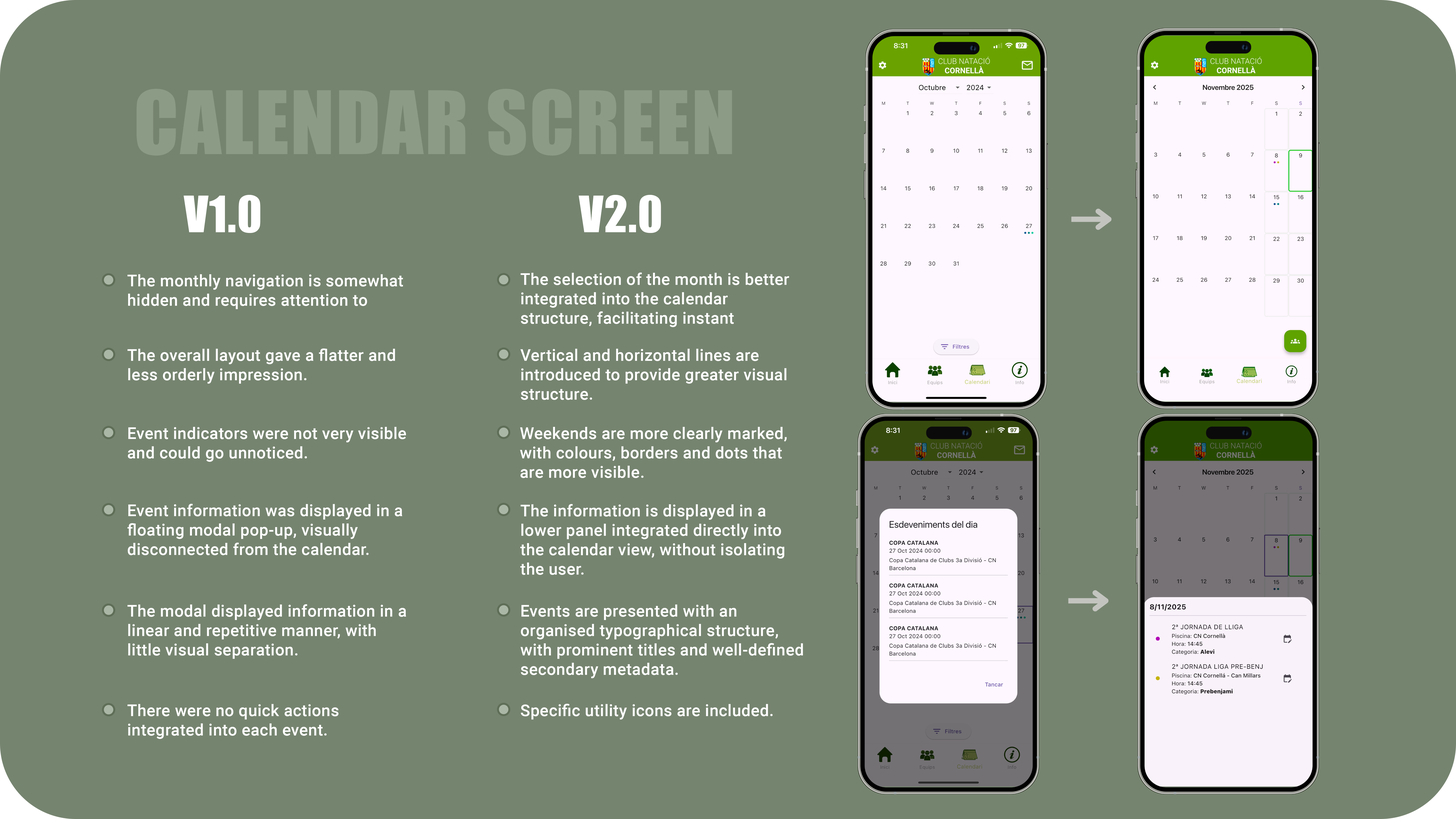
<style>
.page{position:relative;width:1456px;height:819px;background:#75846f}
.page>*{position:absolute;margin:0}
.t1{font:80.9px "Impact";letter-spacing:0.02em;color:#8c9b86}
.t2{font:46.2px "Impact";letter-spacing:0.02em;color:#ffffff}
.t3{font:16.2px "Roboto-Medium";letter-spacing:0.02em;color:#ffffff}
</style>
<div class="page">
<p class="t1" style="left:136px;top:89px;width:596px;height:67px">CALENDAR SCREEN</p>
<p class="t2" style="left:183px;top:195px;width:77px;height:38px">V1.0</p>
<p class="t2" style="left:579px;top:195px;width:82px;height:38px">V2.0</p>
<p class="t3" style="left:127px;top:274px;width:276px;height:35px">The monthly navigation is somewhat hidden and requires attention to locate.</p>
<p class="t3" style="left:521px;top:273px;width:268px;height:54px">The selection of the month is better integrated into the calendar structure, facilitating instant recognition.</p>
<p class="t3" style="left:127px;top:348px;width:268px;height:36px">The overall layout gave a flatter and less orderly impression.</p>
<p class="t3" style="left:520px;top:349px;width:266px;height:51px">Vertical and horizontal lines are introduced to provide greater visual structure.</p>
<p class="t3" style="left:128px;top:427px;width:278px;height:35px">Event indicators were not very visible and could go unnoticed.</p>
<p class="t3" style="left:520px;top:427px;width:267px;height:51px">Weekends are more clearly marked, with colours, borders and dots that are more visible.</p>
<p class="t3" style="left:127px;top:504px;width:275px;height:51px">Event information was displayed in a floating modal pop-up, visually disconnected from the calendar.</p>
<p class="t3" style="left:520px;top:504px;width:264px;height:71px">The information is displayed in a lower panel integrated directly into the calendar view, without isolating the user.</p>
<p class="t3" style="left:127px;top:604px;width:279px;height:55px">The modal displayed information in a linear and repetitive manner, with little visual separation.</p>
<p class="t3" style="left:521px;top:604px;width:282px;height:74px">Events are presented with an organised typographical structure, with prominent titles and well-defined secondary metadata.</p>
<p class="t3" style="left:127px;top:704px;width:212px;height:35px">There were no quick actions integrated into each event.</p>
<p class="t3" style="left:521px;top:704px;width:252px;height:15px">Specific utility icons are included.</p>
</div>
